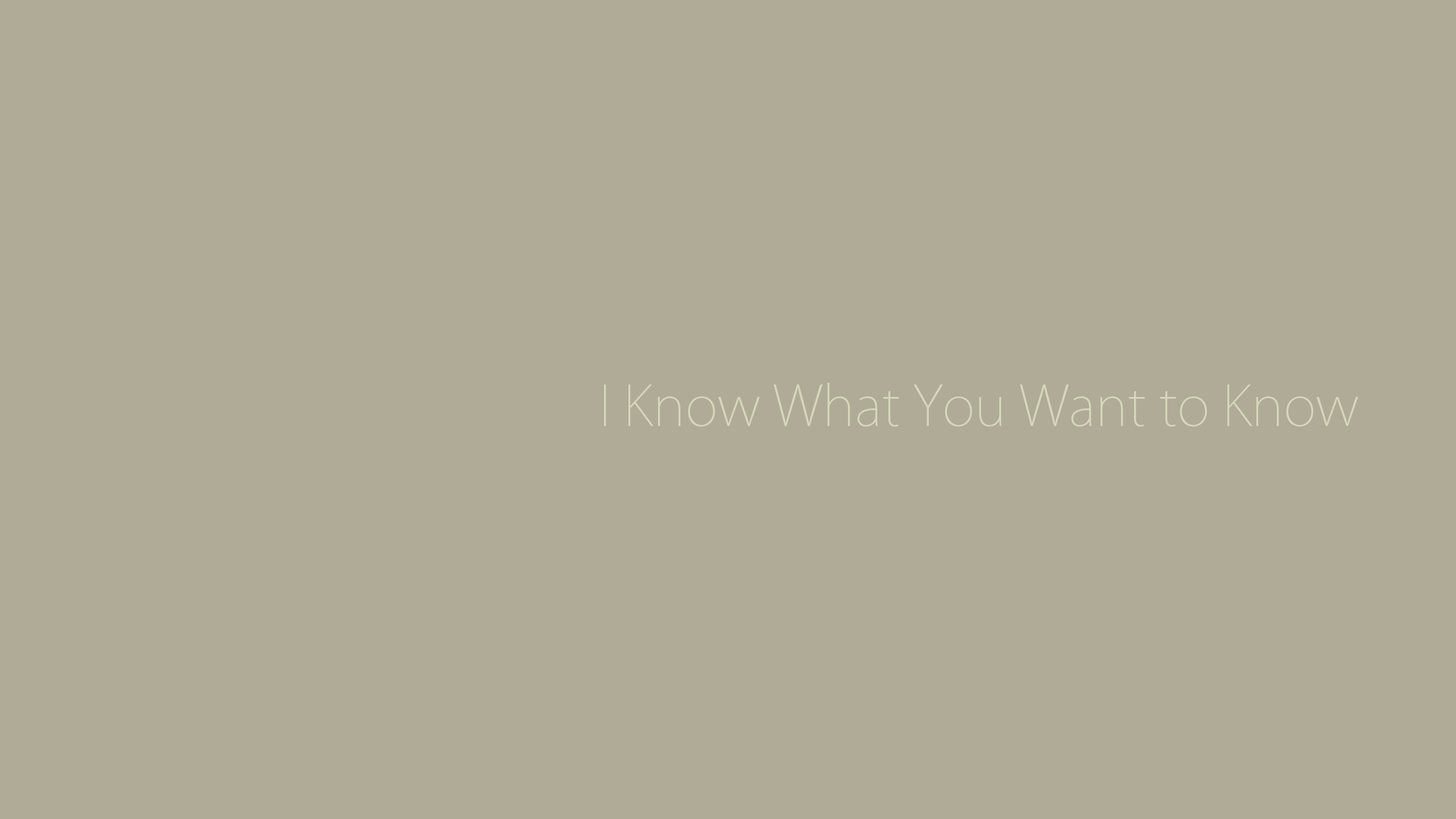
<style>
.page{position:relative;width:1456px;height:819px;background:#afab97}
.page>*{position:absolute;margin:0}
.t1{font:54.6px "KozGoPro-ExtraLight";color:#d4d9b8}
</style>
<div class="page">
<p class="t1" style="left:604px;top:383px;width:754px;height:44px">I Know What You Want to Know</p>
</div>
